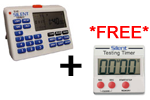
<style>
.page{position:relative;width:150px;height:100px;background:#ffffff}
.page>*{position:absolute;margin:0}
.t1{font:16.7px "ArialMT";color:#ff0000;text-transform:uppercase;font-weight:bold}
.t2{font:41.7px "ArialMT";color:#000000;text-transform:uppercase;font-weight:bold}
</style>
<div class="page">
<p class="t1" style="left:89px;top:26px;width:60px;height:13px">*FREE*</p>
<p class="t2" style="left:60px;top:55px;width:22px;height:21px">+</p>
</div>
